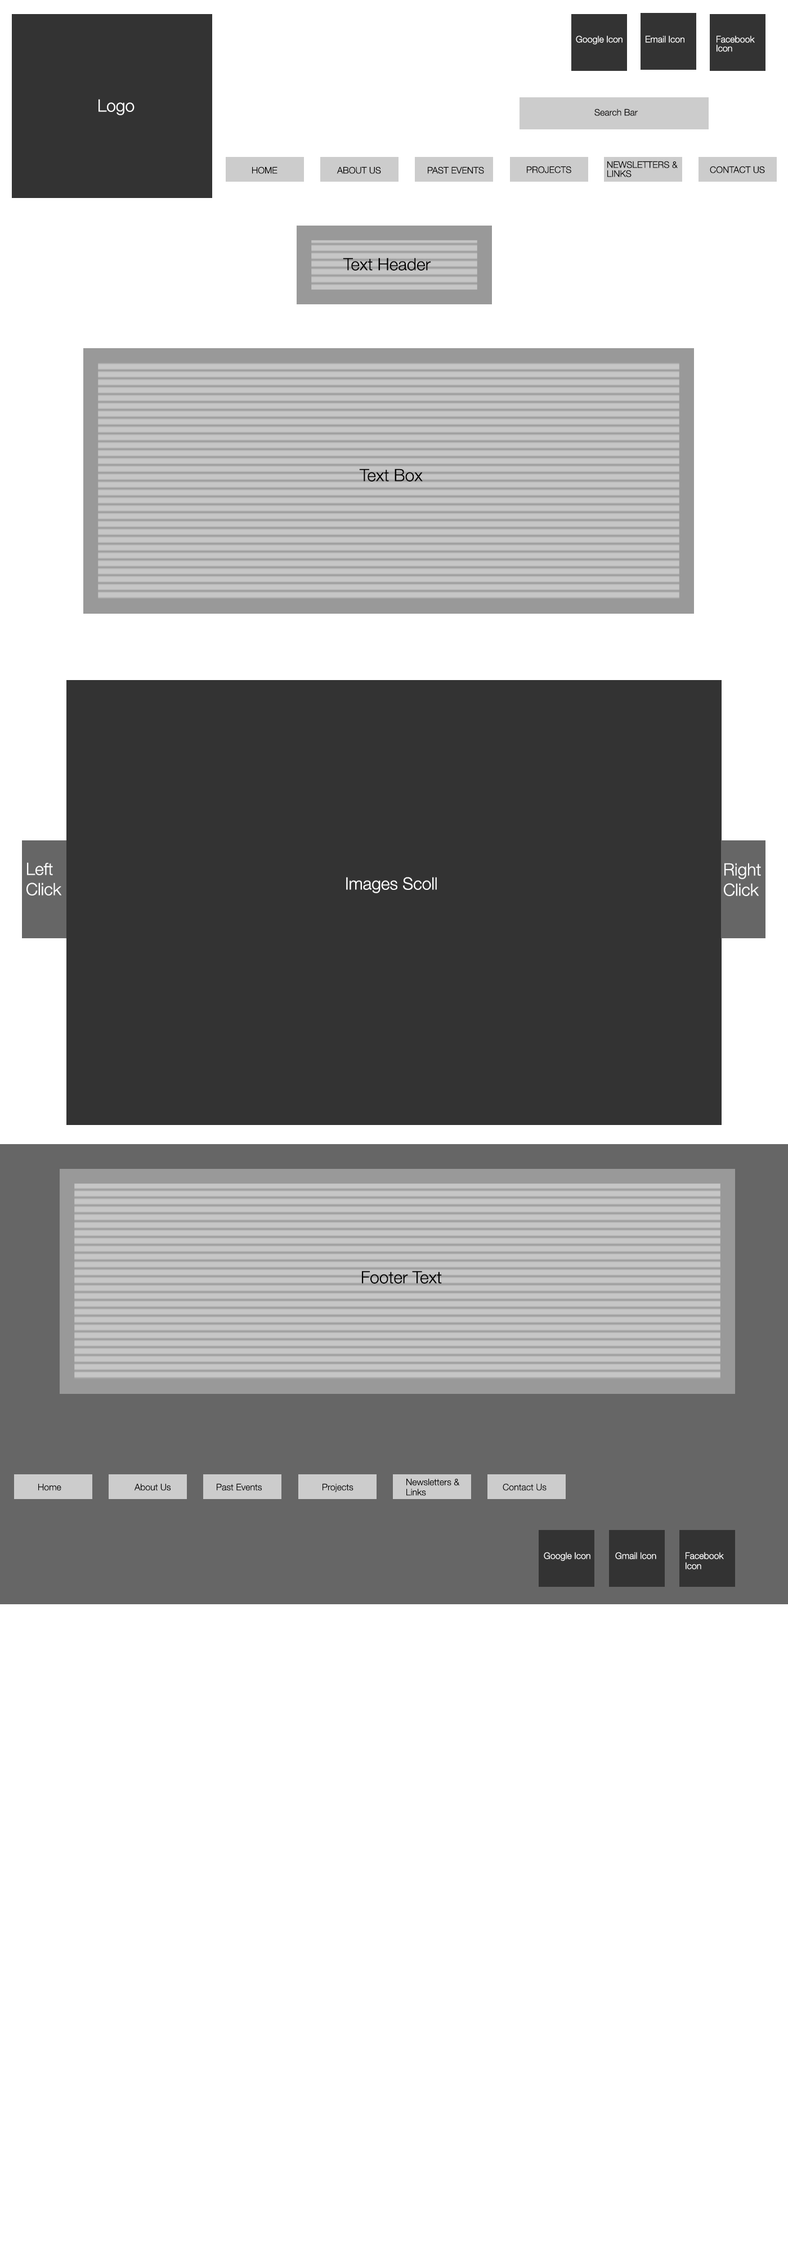
<style>
.page{position:relative;width:788px;height:2250px;background:#ffffff}
.page>*{position:absolute;margin:0}
.t1{font:9px "HelveticaNeue-Light";color:#ffffff}
.t2{font:9px/9px "HelveticaNeue-Light";color:#ffffff}
.t3{font:16.9px "HelveticaNeue-Light";color:#ffffff}
.t4{font:9px "HelveticaNeue-Light";color:#010000}
.t5{font:9px/9px "HelveticaNeue-Light";color:#010000}
.t6{font:16.9px "HelveticaNeue-Light";color:#010000}
.t7{font:16.9px/20.2px "HelveticaNeue-Light";color:#ffffff}
.t8{font:16.9px/9px "HelveticaNeue-Light";color:#ffffff}
.t9{font:16.9px "HelveticaNeue-Light";color:#000000}
.t10{font:9px/10.1px "HelveticaNeue-Light";color:#000000}
.t11{font:9px "HelveticaNeue-Light";color:#000000}
.t12{font:9px/10.1px "HelveticaNeue-Light";color:#ffffff}
</style>
<div class="page">
<p class="t1" style="left:575px;top:35px;width:47px;height:9px">Google Icon</p>
<p class="t1" style="left:645px;top:35px;width:39px;height:8px">Email Icon</p>
<p class="t2" style="left:716px;top:35px;width:38px;height:17px">Facebook Icon</p>
<p class="t3" style="left:98px;top:99px;width:36px;height:16px">Logo</p>
<p class="t4" style="left:594px;top:109px;width:43px;height:7px">Search Bar</p>
<p class="t5" style="left:607px;top:161px;width:70px;height:16px">NEWSLETTERS &amp;<br>LINKS</p>
<p class="t4" style="left:252px;top:166px;width:25px;height:8px">HOME</p>
<p class="t4" style="left:336px;top:166px;width:45px;height:8px">ABOUT US</p>
<p class="t4" style="left:428px;top:166px;width:56px;height:8px">PAST EVENTS</p>
<p class="t4" style="left:526px;top:166px;width:45px;height:7px">PROJECTS</p>
<p class="t4" style="left:709px;top:166px;width:55px;height:7px">CONTACT US</p>
<p class="t6" style="left:343px;top:258px;width:88px;height:13px">Text Header</p>
<p class="t6" style="left:359px;top:469px;width:63px;height:13px">Text Box</p>
<p class="t7" style="left:26px;top:862px;width:36px;height:34px"><span class="t8">Left <br></span>Click</p>
<p class="t7" style="left:723px;top:863px;width:37px;height:33px">Right<br>Click</p>
<p class="t3" style="left:346px;top:877px;width:90px;height:16px">Images Scoll</p>
<p class="t9" style="left:362px;top:1271px;width:80px;height:13px">Footer Text</p>
<p class="t10" style="left:406px;top:1478px;width:54px;height:18px">Newsletters &amp; <br>Links</p>
<p class="t11" style="left:38px;top:1483px;width:23px;height:8px">Home</p>
<p class="t11" style="left:134px;top:1483px;width:37px;height:8px">About Us</p>
<p class="t11" style="left:217px;top:1483px;width:45px;height:8px">Past Events</p>
<p class="t11" style="left:322px;top:1483px;width:31px;height:9px">Projects</p>
<p class="t11" style="left:502px;top:1483px;width:44px;height:8px">Contact Us</p>
<p class="t1" style="left:543px;top:1552px;width:47px;height:9px">Google Icon</p>
<p class="t1" style="left:615px;top:1552px;width:41px;height:7px">Gmail Icon</p>
<p class="t12" style="left:685px;top:1552px;width:38px;height:17px">Facebook<br>Icon</p>
</div>
